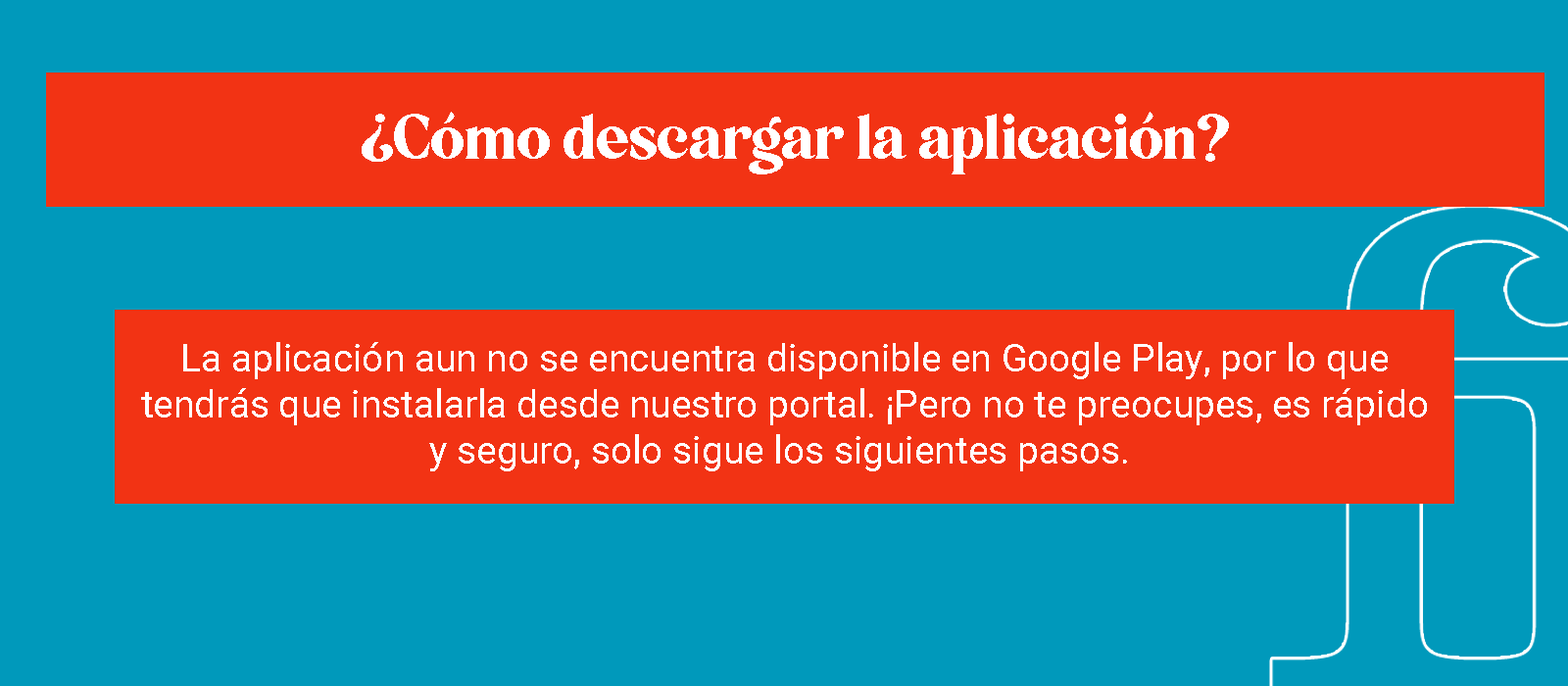
<style>
.page{position:relative;width:1568px;height:686px;background:#0099bb}
.page>*{position:absolute;margin:0}
.t1{font:60.4px "5thAvenue";color:#ffffff}
.t2{font:38.2px "Roboto-Regular";color:#ffffff}
</style>
<div class="page">
<p class="t1" style="left:362px;top:112px;width:867px;height:62px">¿Cómo descargar la aplicación?</p>
<p class="t2" style="left:141px;top:342px;width:1286px;height:129px;text-align:center">La aplicación aun no se encuentra disponible en Google Play, por lo que<br>tendrás que instalarla desde nuestro portal. ¡Pero no te preocupes, es rápido<br>y seguro, solo sigue los siguientes pasos.</p>
</div>
